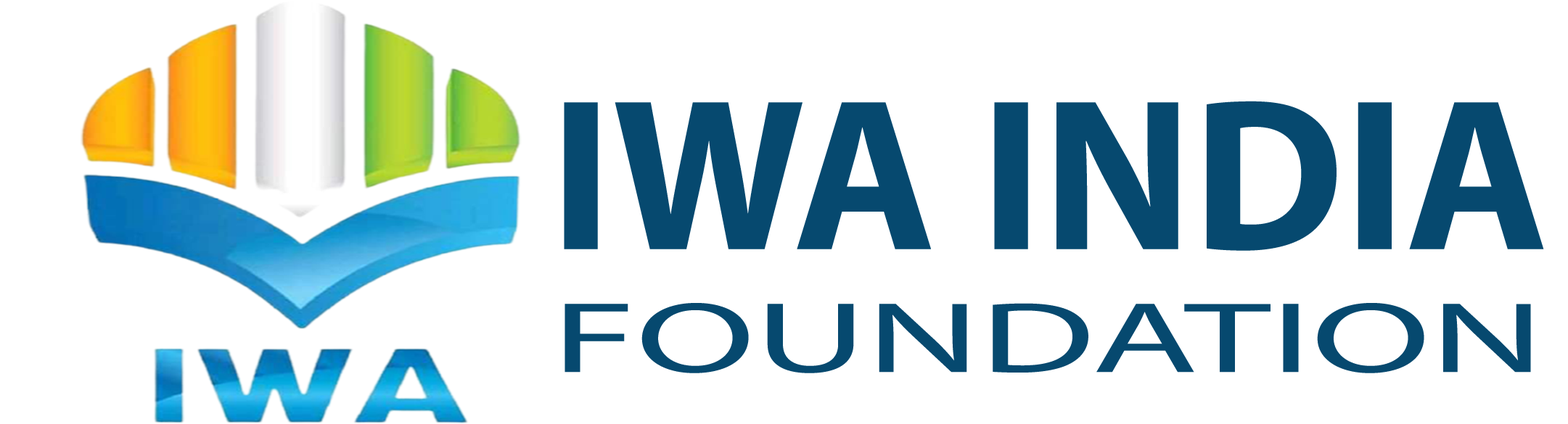
<style>
.page{position:relative;width:1568px;height:424px;background:#ffffff}
.page>*{position:absolute;margin:0}
.t1{font:217.7px "MyriadPro-Bold";color:#06496f;text-transform:uppercase}
.t2{font:100.9px "MyriadPro-Regular";color:#06496f;text-transform:uppercase;scale:1.71 1}
</style>
<div class="page">
<p class="t1" style="left:564px;top:101px;width:980px;height:150px">IWA India</p>
<p class="t2" style="left:565px;top:303px;width:966px;height:71px">Foundation</p>
</div>
